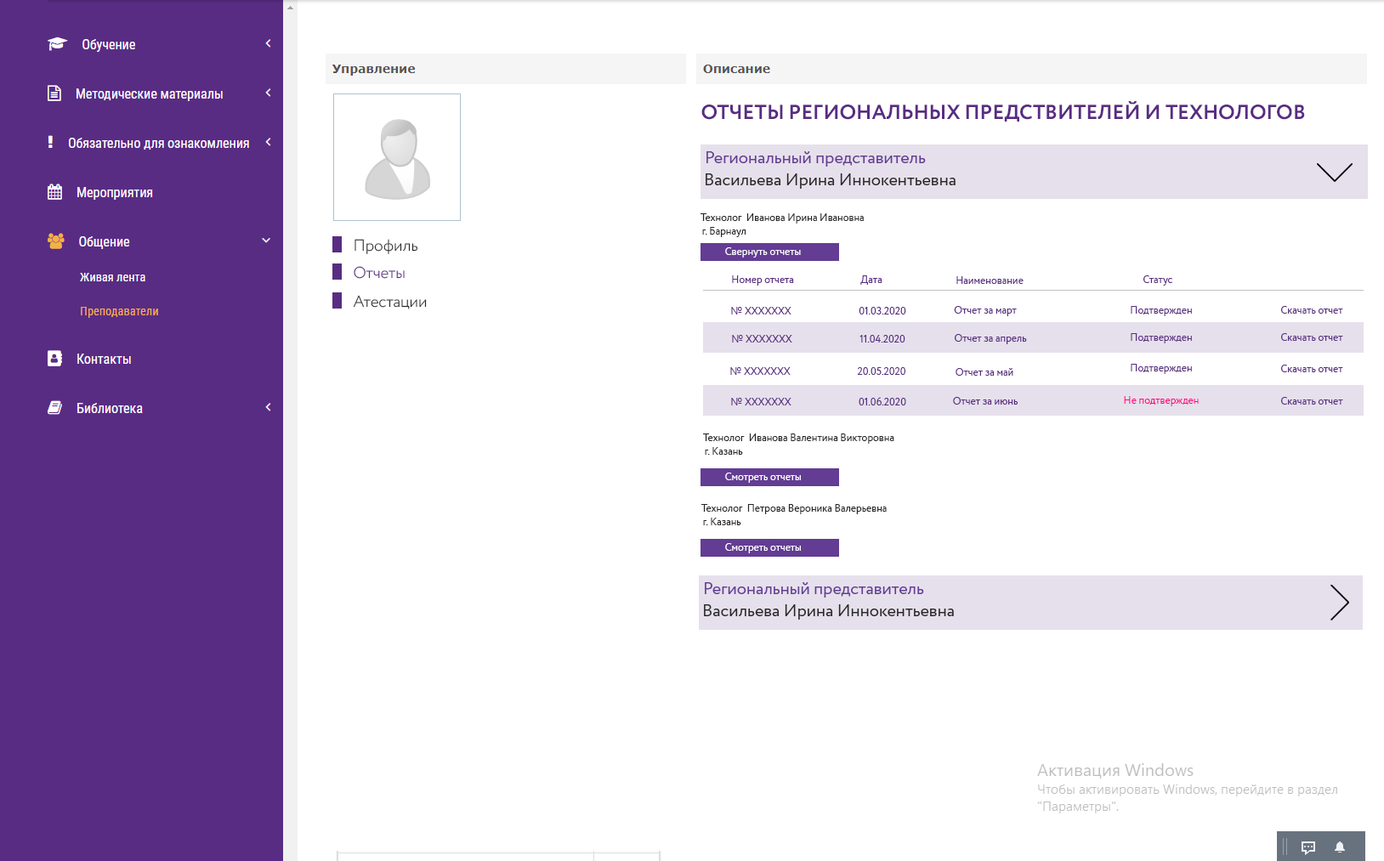
<style>
.page{position:relative;width:1384px;height:861px;background:#ffffff}
.page>*{position:absolute;margin:0}
.t1{font:20.4px "Circe-Bold";color:#592c82;text-transform:uppercase}
.t2{font:17px "Circe-Regular";color:#633c94}
.t3{font:17px "Circe-Regular";color:#272727}
.t4{font:10.2px "Circe-Regular";color:#272727}
.t5{font:15.9px "Circe-Light";color:#272727}
.t6{font:10.2px "Circe-Regular";color:#ffffff}
.t7{font:15.9px "Circe-Light";color:#592c82}
.t8{font:10.2px "Circe-Regular";color:#592c81}
.t9{font:10.2px "Circe-Regular";color:#ff0781}
</style>
<div class="page">
<p class="t1" style="left:702px;top:101px;width:603px;height:21px">Отчеты региональных предствителей и технологов</p>
<p class="t2" style="left:707px;top:151px;width:219px;height:16px">Региональный представитель</p>
<p class="t3" style="left:706px;top:173px;width:250px;height:16px">Васильева Ирина Иннокентьевна</p>
<p class="t4" style="left:701px;top:213px;width:163px;height:11px">Технолог  Иванова Ирина Ивановна</p>
<p class="t4" style="left:702px;top:227px;width:45px;height:10px">г. Барнаул</p>
<p class="t5" style="left:355px;top:239px;width:63px;height:15px">Профиль</p>
<p class="t6" style="left:725px;top:247px;width:76px;height:11px">Свернуть отчеты</p>
<p class="t7" style="left:354px;top:266px;width:51px;height:13px">Отчеты</p>
<p class="t8" style="left:732px;top:276px;width:62px;height:10px">Номер отчета</p>
<p class="t8" style="left:861px;top:276px;width:22px;height:9px">Дата</p>
<p class="t8" style="left:957px;top:276px;width:67px;height:8px">Наименование</p>
<p class="t8" style="left:1144px;top:276px;width:29px;height:10px">Статус</p>
<p class="t5" style="left:353px;top:295px;width:74px;height:15px">Атестации</p>
<p class="t8" style="left:731px;top:307px;width:61px;height:8px">№ ХХХХХХХ</p>
<p class="t8" style="left:859px;top:307px;width:47px;height:8px">01.03.2020</p>
<p class="t8" style="left:954px;top:306px;width:63px;height:10px">Отчет за март</p>
<p class="t8" style="left:1131px;top:306px;width:61px;height:10px">Подтвержден</p>
<p class="t8" style="left:1281px;top:306px;width:63px;height:8px">Скачать отчет</p>
<p class="t8" style="left:732px;top:335px;width:61px;height:8px">№ ХХХХХХХ</p>
<p class="t8" style="left:860px;top:335px;width:46px;height:8px">11.04.2020</p>
<p class="t8" style="left:955px;top:334px;width:72px;height:10px">Отчет за апрель</p>
<p class="t8" style="left:1131px;top:333px;width:61px;height:11px">Подтвержден</p>
<p class="t8" style="left:1281px;top:333px;width:63px;height:8px">Скачать отчет</p>
<p class="t8" style="left:1131px;top:364px;width:61px;height:10px">Подтвержден</p>
<p class="t8" style="left:1281px;top:365px;width:63px;height:7px">Скачать отчет</p>
<p class="t8" style="left:730px;top:367px;width:61px;height:8px">№ ХХХХХХХ</p>
<p class="t8" style="left:857px;top:367px;width:49px;height:8px">20.05.2020</p>
<p class="t8" style="left:956px;top:368px;width:58px;height:8px">Отчет за май</p>
<p class="t8" style="left:731px;top:398px;width:61px;height:8px">№ ХХХХХХХ</p>
<p class="t8" style="left:859px;top:397px;width:47px;height:9px">01.06.2020</p>
<p class="t8" style="left:953px;top:397px;width:66px;height:8px">Отчет за июнь</p>
<p class="t9" style="left:1124px;top:396px;width:75px;height:10px">Не подтвержден</p>
<p class="t8" style="left:1281px;top:397px;width:63px;height:8px">Скачать отчет</p>
<p class="t4" style="left:703px;top:434px;width:192px;height:10px">Технолог  Иванова Валентина Викторовна</p>
<p class="t4" style="left:705px;top:447px;width:38px;height:8px">г. Казань</p>
<p class="t6" style="left:725px;top:473px;width:76px;height:10px">Смотреть отчеты</p>
<p class="t4" style="left:702px;top:504px;width:185px;height:10px">Технолог  Петрова Вероника Валерьевна</p>
<p class="t4" style="left:703px;top:518px;width:38px;height:8px">г. Казань</p>
<p class="t6" style="left:725px;top:543px;width:76px;height:11px">Смотреть отчеты</p>
<p class="t2" style="left:705px;top:582px;width:219px;height:16px">Региональный представитель</p>
<p class="t3" style="left:704px;top:605px;width:250px;height:15px">Васильева Ирина Иннокентьевна</p>
</div>
